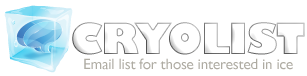
<style>
.page{position:relative;width:307px;height:76px;background:#ffffff}
.page>*{position:absolute;margin:0}
.t1{font:15px "GillSans";letter-spacing:-0.01em;color:#afaca3}
</style>
<div class="page">
<p class="t1" style="left:84px;top:58px;width:209px;height:12px">Email list for those interested in ice</p>
</div>
